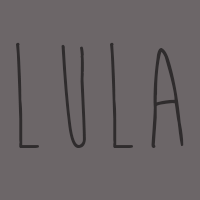
<style>
.page{position:relative;width:200px;height:200px;background:#6c6668}
.page>*{position:absolute;margin:0}
.t1{font:150px "MoonFlower";color:#2f2c2d}
</style>
<div class="page">
<p class="t1" style="left:16px;top:42px;width:168px;height:106px">Lula</p>
</div>
